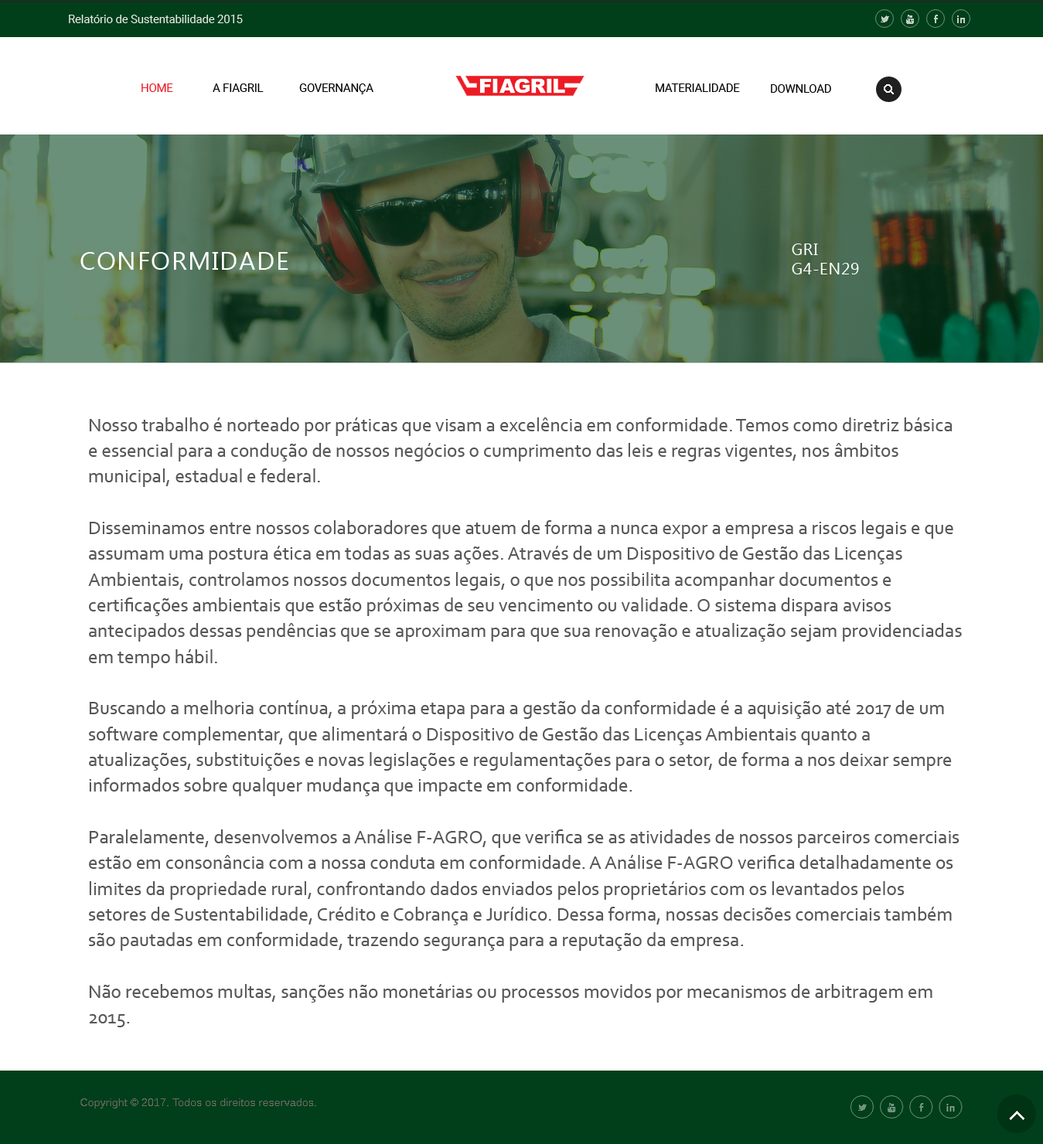
<style>
.page{position:relative;width:1043px;height:1144px;background:#ffffff}
.page>*{position:absolute;margin:0}
.t1{font:11.3px "Roboto-Regular";color:#ebebeb}
.t2{font:11.3px "Roboto-Regular";color:#ec1c24}
.t3{font:11.3px "Roboto-Regular";color:#010000}
.t4{font:16.1px "Ebrima";letter-spacing:0.04em;color:#ffffff}
.t5{font:25.8px "Ebrima";letter-spacing:0.04em;color:#ffffff}
.t6{font:19.3px/25.8px "Corbel";color:#565656}
</style>
<div class="page">
<p class="t1" style="left:69px;top:15px;width:174px;height:8px">Relatório de Sustentabilidade 2015</p>
<p class="t2" style="left:141px;top:83px;width:32px;height:9px">HOME</p>
<p class="t3" style="left:213px;top:83px;width:51px;height:9px">A FIAGRIL</p>
<p class="t3" style="left:299px;top:83px;width:74px;height:11px">GOVERNANÇA</p>
<p class="t3" style="left:655px;top:83px;width:85px;height:9px">MATERIALIDADE</p>
<p class="t3" style="left:771px;top:84px;width:60px;height:9px">DOWNLOAD</p>
<p class="t4" style="left:791px;top:243px;width:68px;height:31px;text-align:justify">GRI<br>G4-EN29</p>
<p class="t5" style="left:80px;top:252px;width:208px;height:18px">CONFORMIDADE</p>
<p class="t6" style="left:88px;top:417px;width:873px;height:610px">Nosso trabalho é norteado por práticas que visam a excelência em conformidade. Temos como diretriz básica e essencial para a condução de nossos negócios o cumprimento das leis e regras vigentes, nos âmbitos municipal, estadual e federal.<br><br>Disseminamos entre nossos colaboradores que atuem de forma a nunca expor a empresa a riscos legais e que assumam uma postura ética em todas as suas ações. Através de um Dispositivo de Gestão das Licenças Ambientais, controlamos nossos documentos legais, o que nos possibilita acompanhar documentos e certiﬁcações ambientais que estão próximas de seu vencimento ou validade. O sistema dispara avisos antecipados dessas pendências que se aproximam para que sua renovação e atualização sejam providenciadas em tempo hábil.<br><br>Buscando a melhoria contínua, a próxima etapa para a gestão da conformidade é a aquisição até 2017 de um software complementar, que alimentará o Dispositivo de Gestão das Licenças Ambientais quanto a atualizações, substituições e novas legislações e regulamentações para o setor, de forma a nos deixar sempre<br>informados sobre qualquer mudança que impacte em conformidade.<br><br>Paralelamente, desenvolvemos a Análise F-AGRO, que veriﬁca se as atividades de nossos parceiros comerciais estão em consonância com a nossa conduta em conformidade. A Análise F-AGRO veriﬁca detalhadamente os limites da propriedade rural, confrontando dados enviados pelos proprietários com os levantados pelos<br>setores de Sustentabilidade, Crédito e Cobrança e Jurídico. Dessa forma, nossas decisões comerciais também são pautadas em conformidade, trazendo segurança para a reputação da empresa.<br><br>Não recebemos multas, sanções não monetárias ou processos movidos por mecanismos de arbitragem em 2015.</p>
</div>
